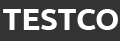
<style>
.page{position:relative;width:120px;height:41px;background:#333333}
.page>*{position:absolute;margin:0}
.t1{font:31px "Ubuntu-Bold";color:#ffffff}
</style>
<div class="page">
<p class="t1" style="left:3px;top:9px;width:115px;height:21px">TESTCO</p>
</div>
